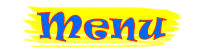
<style>
.page{position:relative;width:200px;height:50px;background:#ffffff}
.page>*{position:absolute;margin:0}
.t1{font:36px "Ravie"}
</style>
<div class="page">
<p class="t1" style="left:37px;top:11px;width:130px;height:31px">Menu</p>
</div>
